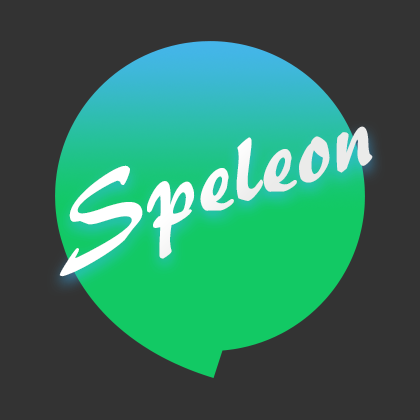
<style>
.page{position:relative;width:420px;height:420px;background:#333333}
.page>*{position:absolute;margin:0}
.t1{font:100px "BERKLEY-Normal";color:#ffffff}
</style>
<div class="page">
<p class="t1" style="left:59px;top:126px;width:314px;height:151px;rotate:-17deg">Speleon</p>
</div>
